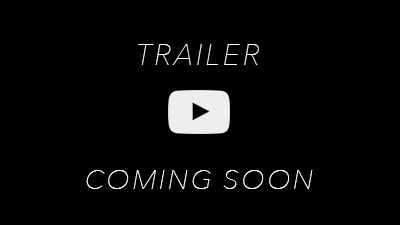
<style>
.page{position:relative;width:400px;height:225px;background:#000000}
.page>*{position:absolute;margin:0}
.t1{font:50px "AvenirNext-UltraLightItalic";letter-spacing:0.1em;color:#ffffff}
.t2{font:45.8px "AvenirNext-UltraLightItalic";letter-spacing:0.1em;color:#ffffff}
</style>
<div class="page">
<p class="t1" style="left:138px;top:44px;width:121px;height:21px">TRAILER</p>
<p class="t2" style="left:86px;top:170px;width:227px;height:19px">COMING SOON</p>
</div>
